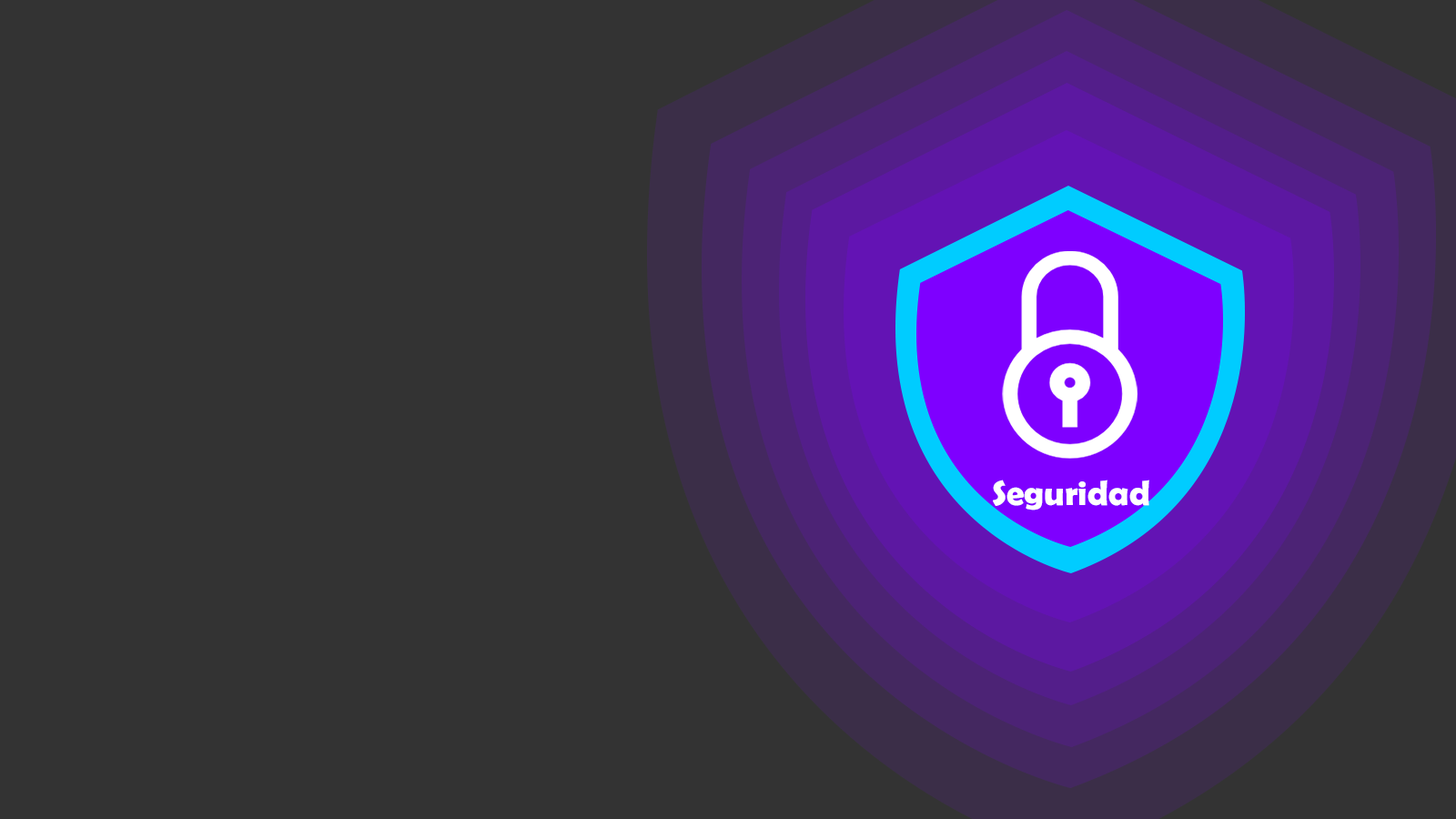
<style>
.page{position:relative;width:1456px;height:819px;background:#333333}
.page>*{position:absolute;margin:0}
.t1{font:35.2px "BerlinSansFBDemi-Bold";color:#ffffff}
</style>
<div class="page">
<p class="t1" style="left:993px;top:480px;width:156px;height:31px">Seguridad</p>
</div>
